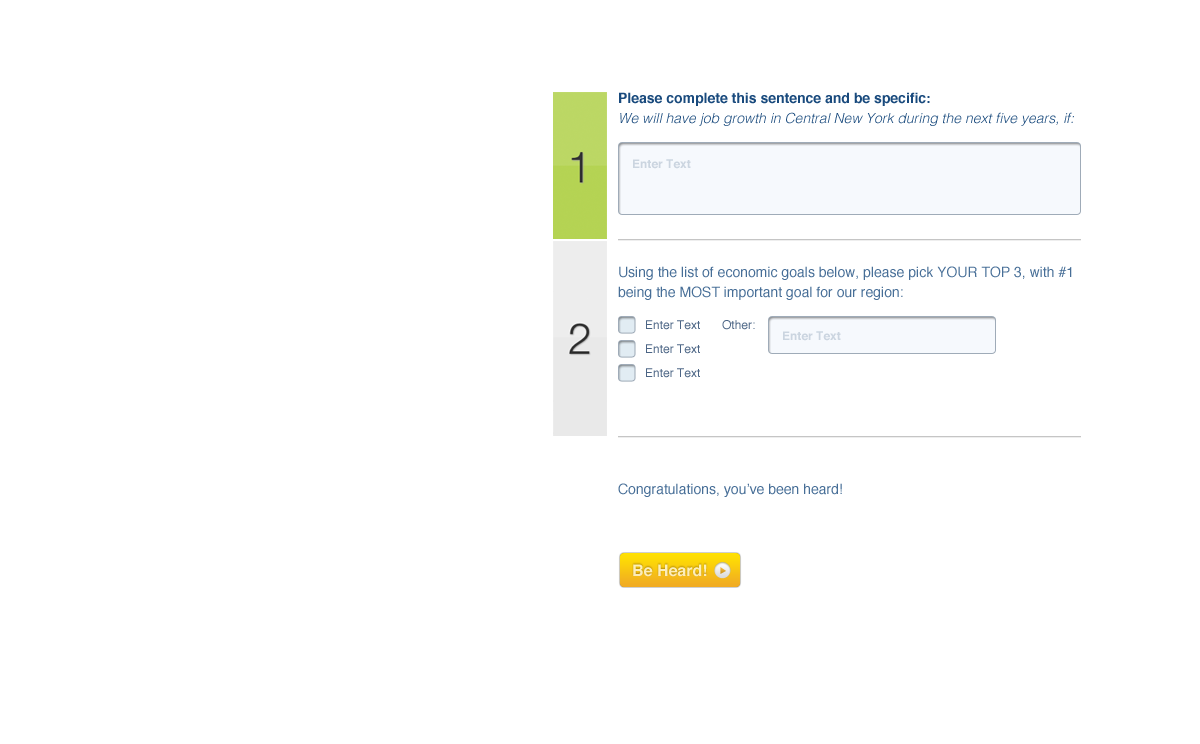
<style>
.page{position:relative;width:1200px;height:744px;background:#ffffff}
.page>*{position:absolute;margin:0}
.t1{font:14px/20px "Helvetica-LightOblique";color:#194a7d}
.t2{font:14px/20px "Helvetica-Bold";color:#194a7d}
.t3{font:12px "Helvetica-Bold";color:#cbd5e0}
.t4{font:14px/20px "Helvetica";color:#476e97}
.t5{font:12px "Helvetica";color:#4c6585}
.t6{font:14px "Helvetica";color:#476e97}
.t7{font:16px "Helvetica-Bold";color:#fdedb9}
</style>
<div class="page">
<p class="t1" style="left:619px;top:92px;width:455px;height:34px"><span class="t2">Please complete this sentence and be specific: <br></span>We will have job growth in Central New York during the next five years, if:</p>
<p class="t3" style="left:633px;top:159px;width:58px;height:10px">Enter Text</p>
<p class="t4" style="left:618px;top:266px;width:454px;height:34px">Using the list of economic goals below, please pick YOUR TOP 3, with #1 being the MOST important goal for our region:</p>
<p class="t5" style="left:646px;top:320px;width:54px;height:10px">Enter Text</p>
<p class="t5" style="left:722px;top:320px;width:33px;height:10px">Other:</p>
<p class="t3" style="left:783px;top:331px;width:58px;height:10px">Enter Text</p>
<p class="t5" style="left:646px;top:344px;width:54px;height:10px">Enter Text</p>
<p class="t5" style="left:646px;top:368px;width:54px;height:10px">Enter Text</p>
<p class="t6" style="left:618px;top:483px;width:224px;height:14px">Congratulations, you’ve been heard!</p>
<p class="t7" style="left:633px;top:564px;width:74px;height:13px">Be Heard!</p>
</div>
